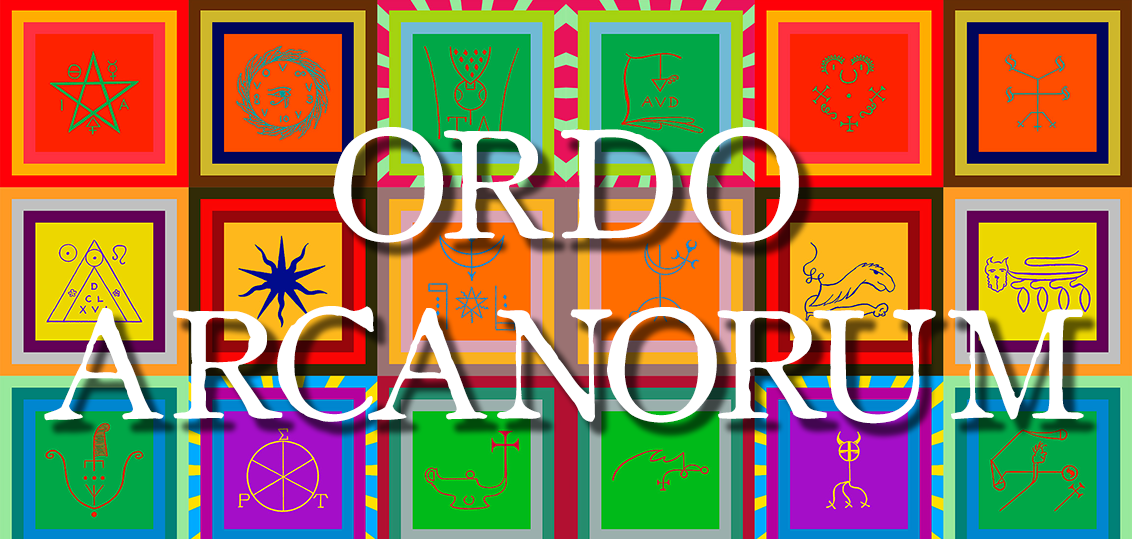
<style>
.page{position:relative;width:1132px;height:539px}
.page>*{position:absolute;margin:0}
.t1{font:150px "ColdstyleRoman";color:#ffffff}
</style>
<div class="page">
<p class="t1" style="left:44px;top:127px;width:1040px;height:297px;text-align:center">ORDO<br>ARCANORUM</p>
</div>
